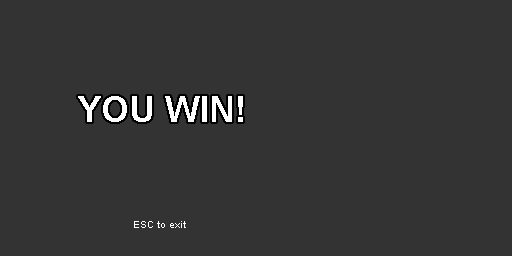
<style>
.page{position:relative;width:512px;height:256px;background:#333333}
.page>*{position:absolute;margin:0}
.t1{font:36px "Arial-BoldMT";color:#ffffff}
.t2{font:10px "ArialMT";color:#ffffff}
</style>
<div class="page">
<p class="t1" style="left:78px;top:96px;width:165px;height:26px">YOU WIN!</p>
<p class="t2" style="left:134px;top:221px;width:52px;height:7px">ESC to exit</p>
</div>
